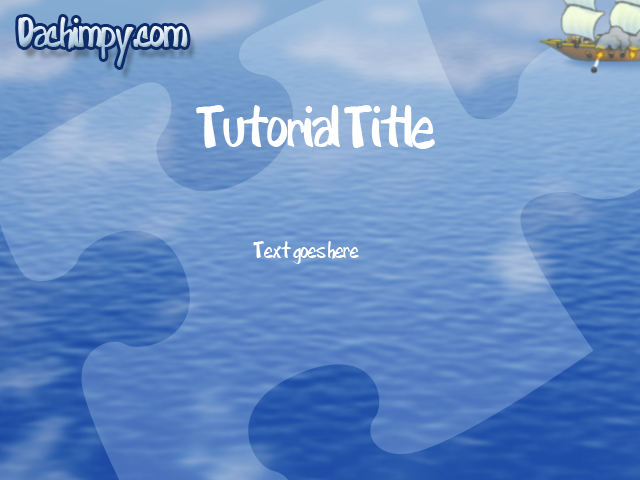
<style>
.page{position:relative;width:640px;height:480px}
.page>*{position:absolute;margin:0}
.t1{font:51.8px "Cartoon";letter-spacing:-0.08em;scale:0.67 1}
.t2{font:72px "Cartoon";letter-spacing:-0.08em;color:#ffffff;scale:0.67 1}
.t3{font:27px "Cartoon";letter-spacing:-0.08em;color:#ffffff;scale:0.67 1}
</style>
<div class="page">
<p class="t1" style="left:18px;top:17px;width:170px;height:50px">Dachimpy.com</p>
<p class="t2" style="left:196px;top:105px;width:239px;height:44px">Tutorial Title</p>
<p class="t3" style="left:253px;top:241px;width:106px;height:23px">Text goes here</p>
</div>
